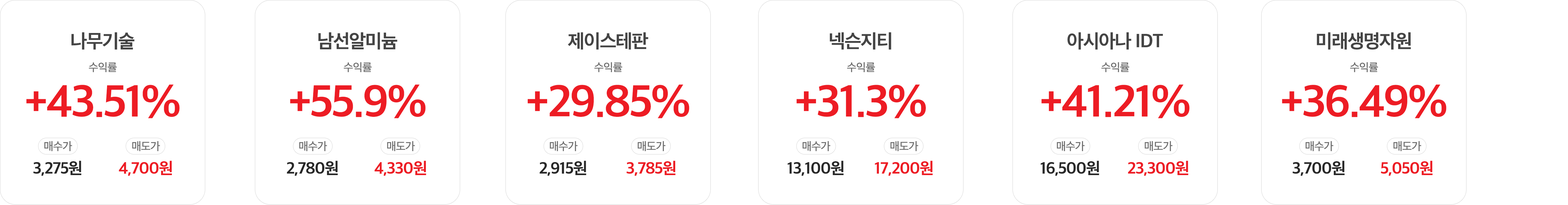
<style>
.page{position:relative;width:1568px;height:205px;background:#ffffff}
.page>*{position:absolute;margin:0}
.t1{font:18.2px "SDGothicNeoa-gBd";letter-spacing:-0.04em;color:#444444}
.t2{font:10.7px "SDGothicNeoa-eMd";letter-spacing:-0.04em;color:#6e6e6e}
.t3{font:42.6px "SDGothicNeoa-gBd";letter-spacing:-0.04em;color:#ed1c24}
.t4{font:15.5px "SDGothicNeoa-gBd";letter-spacing:-0.04em;color:#282828}
.t5{font:15.5px "SDGothicNeoa-gBd";letter-spacing:-0.04em;color:#ed1c24}
</style>
<div class="page">
<p class="t1" style="left:71px;top:32px;width:64px;height:18px">나무기술</p>
<p class="t1" style="left:318px;top:32px;width:79px;height:18px">남선알미늄</p>
<p class="t1" style="left:568px;top:32px;width:80px;height:18px">제이스테판</p>
<p class="t1" style="left:830px;top:32px;width:61px;height:18px">넥슨지티</p>
<p class="t1" style="left:1067px;top:32px;width:96px;height:18px">아시아나 IDT</p>
<p class="t1" style="left:1317px;top:32px;width:94px;height:18px">미래생명자원</p>
<p class="t2" style="left:89px;top:62px;width:28px;height:10px">수익률</p>
<p class="t2" style="left:344px;top:62px;width:28px;height:10px">수익률</p>
<p class="t2" style="left:594px;top:62px;width:28px;height:10px">수익률</p>
<p class="t2" style="left:847px;top:62px;width:28px;height:10px">수익률</p>
<p class="t2" style="left:1101px;top:62px;width:28px;height:10px">수익률</p>
<p class="t2" style="left:1350px;top:62px;width:28px;height:10px">수익률</p>
<p class="t3" style="left:26px;top:85px;width:154px;height:34px">+43.51%</p>
<p class="t3" style="left:290px;top:85px;width:136px;height:34px">+55.9%</p>
<p class="t3" style="left:528px;top:85px;width:161px;height:34px">+29.85%</p>
<p class="t3" style="left:796px;top:85px;width:130px;height:34px">+31.3%</p>
<p class="t3" style="left:1042px;top:85px;width:148px;height:34px">+41.21%</p>
<p class="t3" style="left:1282px;top:85px;width:164px;height:34px">+36.49%</p>
<p class="t2" style="left:44px;top:141px;width:28px;height:11px">매수가</p>
<p class="t2" style="left:132px;top:141px;width:28px;height:11px">매도가</p>
<p class="t2" style="left:299px;top:141px;width:28px;height:11px">매수가</p>
<p class="t2" style="left:387px;top:141px;width:28px;height:11px">매도가</p>
<p class="t2" style="left:550px;top:141px;width:28px;height:11px">매수가</p>
<p class="t2" style="left:638px;top:141px;width:28px;height:11px">매도가</p>
<p class="t2" style="left:802px;top:141px;width:28px;height:11px">매수가</p>
<p class="t2" style="left:890px;top:141px;width:28px;height:11px">매도가</p>
<p class="t2" style="left:1057px;top:141px;width:28px;height:11px">매수가</p>
<p class="t2" style="left:1145px;top:141px;width:28px;height:11px">매도가</p>
<p class="t2" style="left:1305px;top:141px;width:28px;height:11px">매수가</p>
<p class="t2" style="left:1393px;top:141px;width:28px;height:11px">매도가</p>
<p class="t4" style="left:33px;top:161px;width:48px;height:15px">3,275원</p>
<p class="t5" style="left:119px;top:161px;width:53px;height:15px">4,700원</p>
<p class="t4" style="left:287px;top:161px;width:51px;height:15px">2,780원</p>
<p class="t5" style="left:374px;top:161px;width:52px;height:15px">4,330원</p>
<p class="t4" style="left:539px;top:161px;width:47px;height:15px">2,915원</p>
<p class="t5" style="left:626px;top:161px;width:50px;height:15px">3,785원</p>
<p class="t4" style="left:788px;top:161px;width:56px;height:15px">13,100원</p>
<p class="t5" style="left:875px;top:161px;width:58px;height:15px">17,200원</p>
<p class="t4" style="left:1041px;top:161px;width:58px;height:15px">16,500원</p>
<p class="t5" style="left:1128px;top:161px;width:60px;height:15px">23,300원</p>
<p class="t4" style="left:1292px;top:161px;width:53px;height:15px">3,700원</p>
<p class="t5" style="left:1381px;top:161px;width:52px;height:15px">5,050원</p>
</div>
